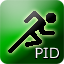
<style>
.page{position:relative;width:64px;height:64px}
.page>*{position:absolute;margin:0}
.t1{font:13.9px "Verdana";color:#ffffff}
</style>
<div class="page">
<p class="t1" style="left:36px;top:47px;width:23px;height:11px">PID</p>
</div>
